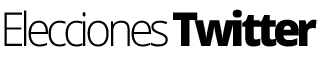
<style>
.page{position:relative;width:325px;height:60px;background:#ffffff}
.page>*{position:absolute;margin:0}
.t1{font:46.8px "OpenSans-Light";letter-spacing:-0.1em;color:#000000;scale:0.95 1}
.t2{font:46.8px "OpenSans-Extrabold";letter-spacing:-0.1em;color:#000000;scale:0.95 1}
</style>
<div class="page">
<p class="t1" style="left:4px;top:9px;width:313px;height:38px">Elecciones <span class="t2">Twitter</span></p>
</div>
